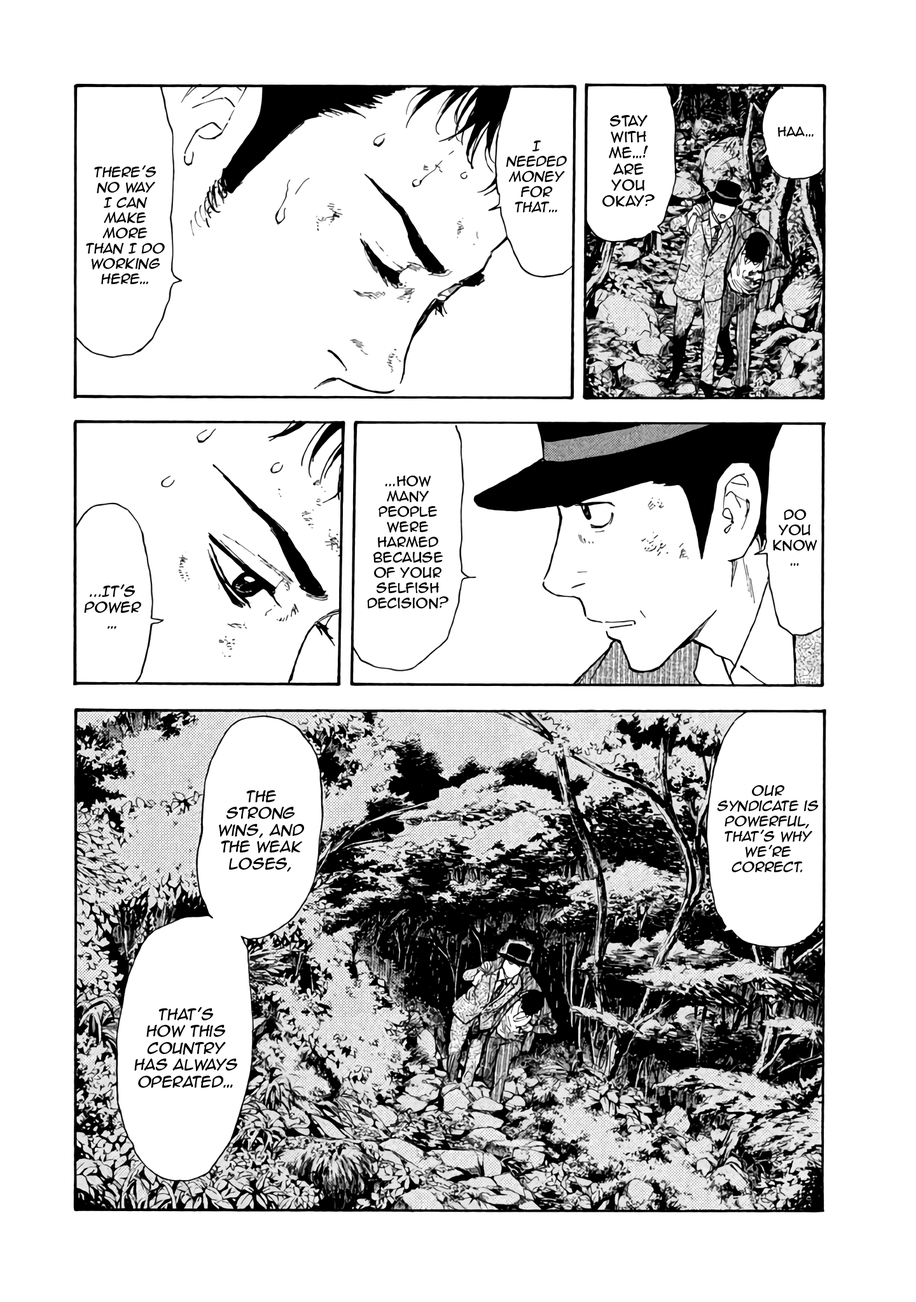
<style>
.page{position:relative;width:916px;height:1302px;background:#ffffff}
.page>*{position:absolute;margin:0}
.t1{font:13.4px "AnimeAce2.0BB";color:#000000}
.t2{font:12.1px "AnimeAce2.0BB";color:#000000}
.t3{font:12.7px "AnimeAce2.0BB";color:#000000;font-style:italic}
.t4{font:12.7px "AnimeAce2.0BB";color:#000000}
.t5{font:13.4px "AnimeAce2.0BB";color:#000000;font-style:italic}
.t6{font:14px "AnimeAce2.0BB";color:#000000;font-style:italic}
</style>
<div class="page">
<p class="t1" style="left:602px;top:115px;width:52px;height:92px;text-align:center">Stay<br>with<br>me…!<br>Are<br>you<br>okay?</p>
<p class="t2" style="left:778px;top:127px;width:35px;height:10px">Haa…</p>
<p class="t3" style="left:506px;top:140px;width:61px;height:73px;text-align:center">I<br>needed<br>money<br>for<br>that…</p>
<p class="t3" style="left:86px;top:165px;width:79px;height:119px;text-align:center">There’s<br>no way<br>I can<br>make<br>more<br>than I do<br>working<br>here…</p>
<p class="t4" style="left:367px;top:476px;width:81px;height:133px;text-align:center">...how<br>many<br>people<br>were<br>harmed<br>because<br>of your<br>selfish<br>decision?</p>
<p class="t4" style="left:773px;top:509px;width:44px;height:57px;text-align:center">do<br>you<br>know<br>…</p>
<p class="t5" style="left:84px;top:584px;width:57px;height:45px;text-align:center">...It’s<br>Power<br>…</p>
<p class="t3" style="left:717px;top:785px;width:101px;height:87px;text-align:center">Our<br>syndicate is<br>powerful,<br>that’s why<br>we’re<br>correct.</p>
<p class="t6" style="left:219px;top:790px;width:86px;height:82px;text-align:center">The<br>strong<br>wins, and<br>the weak<br>loses,</p>
<p class="t6" style="left:134px;top:1007px;width:104px;height:81px;text-align:center">that’s<br>how This<br>country<br>has always<br>operated…</p>
</div>
